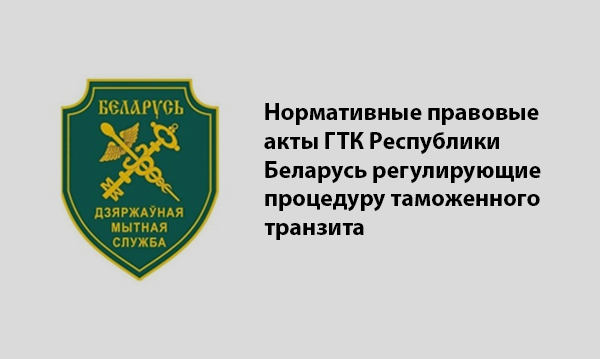
<style>
.page{position:relative;width:600px;height:359px;background:#dadada}
.page>*{position:absolute;margin:0}
.t1{font:24px "MyriadPro-Bold";color:#000000}
</style>
<div class="page">
<p class="t1" style="left:264px;top:103px;width:277px;height:137px">Нормативные правовые акты ГТК Республики Беларусь регулирующие процедуру таможенного транзита</p>
</div>
